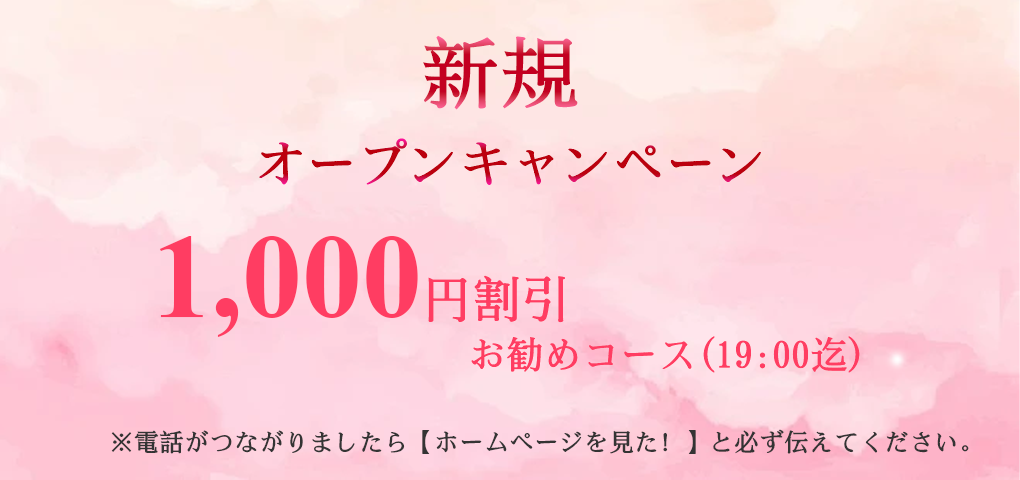
<style>
.page{position:relative;width:1020px;height:480px}
.page>*{position:absolute;margin:0}
.t1{font:80px "SimSong-Bold"}
.t2{font:51.2px "SimSong-Bold";color:#bb010e}
.t3{font:120px "TimesNewRomanPS-BoldMT";color:#ff3d62}
.t4{font:50px "SimSong-Bold";color:#ff3d62}
.t5{font:37.9px "SimSong-Bold";color:#ff3d62}
.t6{font:25px "SimSong-Bold";color:#343434}
</style>
<div class="page">
<p class="t1" style="left:423px;top:35px;width:155px;height:75px">新規</p>
<p class="t2" style="left:259px;top:138px;width:502px;height:47px">オープンキャンペーン</p>
<p class="t3" style="left:159px;top:236px;width:406px;height:101px">1,000<span class="t4">円割引</span></p>
<p class="t5" style="left:471px;top:336px;width:389px;height:37px">お勧めコース(19:00迄)</p>
<p class="t6" style="left:111px;top:429px;width:858px;height:25px">※電話がつながりましたら【ホームページを見た！】と必ず伝えてください。</p>
</div>
